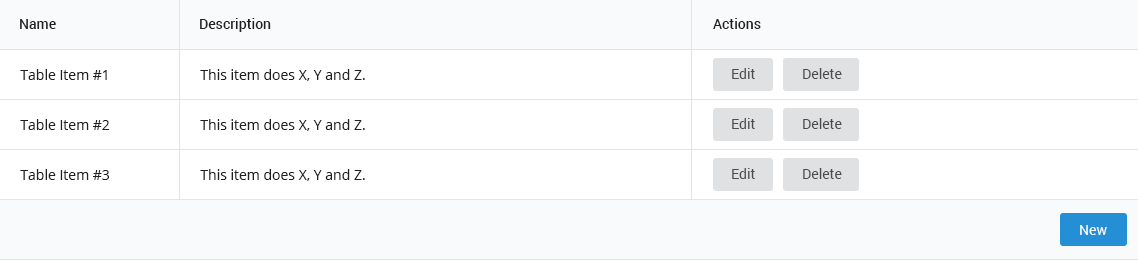
<style>
.page{position:relative;width:1138px;height:260px;background:#ffffff}
.page>*{position:absolute;margin:0}
.t1{font:14px "Roboto-Medium";color:#202020}
.t2{font:14px "OpenSans";color:#202020}
.t3{font:14px "Roboto-Regular";color:#4c4c4c}
.t4{font:14px "Roboto-Regular";color:#fefefe}
</style>
<div class="page">
<p class="t1" style="left:20px;top:19px;width:36px;height:10px">Name</p>
<p class="t1" style="left:200px;top:18px;width:71px;height:14px">Description</p>
<p class="t1" style="left:713px;top:18px;width:48px;height:11px">Actions</p>
<p class="t2" style="left:20px;top:69px;width:87px;height:11px">Table Item #1</p>
<p class="t2" style="left:200px;top:69px;width:165px;height:12px">This item does X, Y and Z.</p>
<p class="t3" style="left:732px;top:68px;width:23px;height:11px">Edit</p>
<p class="t3" style="left:803px;top:68px;width:39px;height:11px">Delete</p>
<p class="t2" style="left:20px;top:119px;width:90px;height:11px">Table Item #2</p>
<p class="t2" style="left:200px;top:119px;width:165px;height:12px">This item does X, Y and Z.</p>
<p class="t3" style="left:732px;top:118px;width:23px;height:11px">Edit</p>
<p class="t3" style="left:803px;top:118px;width:39px;height:11px">Delete</p>
<p class="t2" style="left:20px;top:169px;width:89px;height:11px">Table Item #3</p>
<p class="t2" style="left:200px;top:169px;width:165px;height:12px">This item does X, Y and Z.</p>
<p class="t3" style="left:732px;top:168px;width:23px;height:11px">Edit</p>
<p class="t3" style="left:803px;top:168px;width:39px;height:11px">Delete</p>
<p class="t4" style="left:1080px;top:225px;width:27px;height:10px">New</p>
</div>
